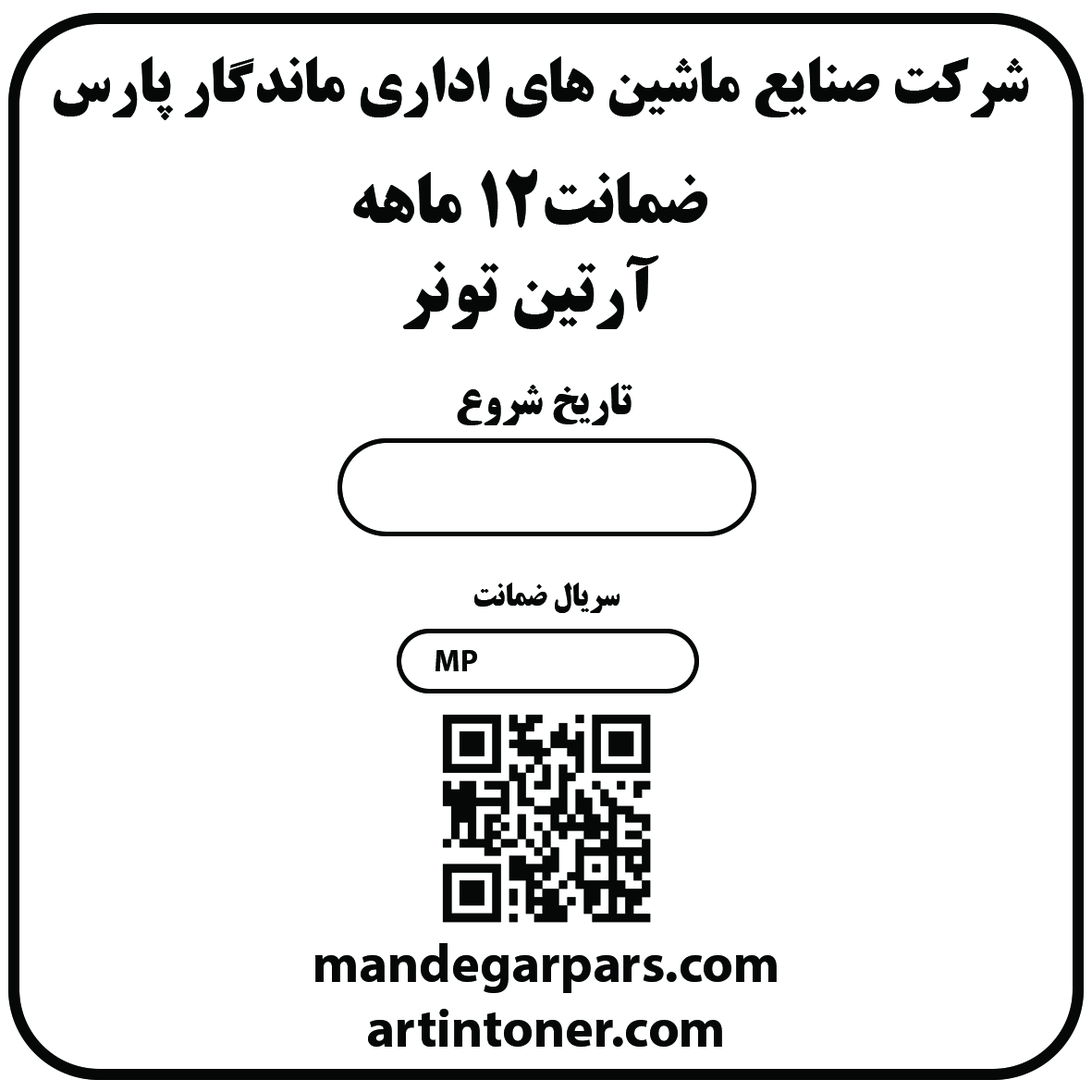
<style>
.page{position:relative;width:1092px;height:1092px;background:#ffffff}
.page>*{position:absolute;margin:0}
.t1{font:61.6px "BTitrBold";color:#060808;text-transform:uppercase}
.t2{font:69.3px "BTitrBold";color:#060808;text-transform:uppercase}
.t3{font:42.4px "BTitrBold";color:#060808;text-transform:uppercase}
.t4{font:30.8px "BTitrBold";color:#060808;text-transform:uppercase}
.t5{font:30.8px "MyriadPro-Bold";color:#060808;text-transform:uppercase}
.t6{font:53.9px "MyriadPro-Bold";color:#060808}
</style>
<div class="page">
<p class="t1" style="left:54px;top:56px;width:975px;height:64px">شرکت صنایع ماشین های اداری ماندگار پارس</p>
<p class="t2" style="left:353px;top:169px;width:354px;height:58px">ضمانت12 ماهه</p>
<p class="t2" style="left:403px;top:255px;width:256px;height:74px">آرتین تونر</p>
<p class="t3" style="left:457px;top:383px;width:175px;height:42px">تاریخ شروع</p>
<p class="t4" style="left:474px;top:583px;width:146px;height:30px">سریال ضمانت</p>
<p class="t5" style="left:435px;top:650px;width:42px;height:21px">MP</p>
<p class="t6" style="left:315px;top:943px;width:462px;height:104px;text-align:center">mandegarpars.com<br>artintoner.com</p>
</div>
